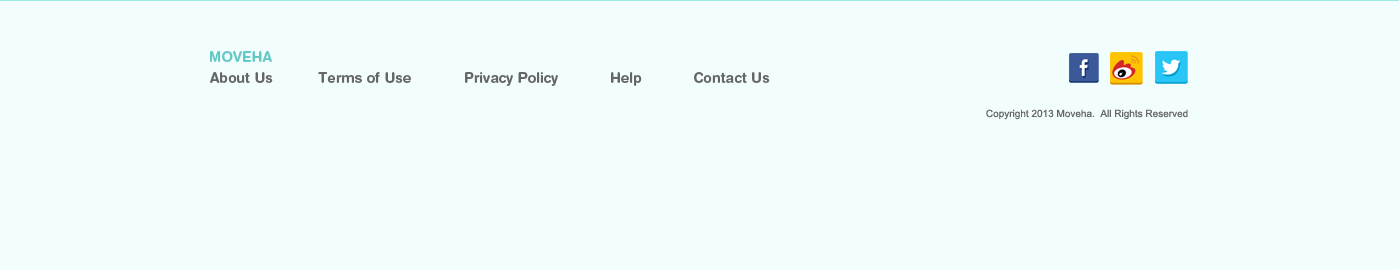
<style>
.page{position:relative;width:1400px;height:270px;background:#f2fefd}
.page>*{position:absolute;margin:0}
.t1{font:14px "HelveticaRoundedLTStd-Bd";color:#65c8c5;text-transform:uppercase}
.t2{font:14px "HelveticaRoundedLTStd-Bd";color:#666666}
.t3{font:10px "ArialMT";color:#666666}
</style>
<div class="page">
<p class="t1" style="left:210px;top:51px;width:62px;height:11px">Moveha</p>
<p class="t2" style="left:210px;top:72px;width:201px;height:11px">About Us  Terms of Use</p>
<p class="t2" style="left:465px;top:72px;width:305px;height:14px">Privacy Policy            Help            Contact Us</p>
<p class="t3" style="left:986px;top:109px;width:202px;height:11px">Copyright 2013 Moveha.  All Rights Reserved</p>
</div>
